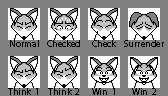
<style>
.page{position:relative;width:168px;height:96px;background:#808080}
.page>*{position:absolute;margin:0}
.t1{font:9.3px "MyriadPro-Regular";color:#000000}
</style>
<div class="page">
<p class="t1" style="left:10px;top:40px;width:29px;height:7px">Normal</p>
<p class="t1" style="left:47px;top:40px;width:33px;height:7px">Checked</p>
<p class="t1" style="left:92px;top:40px;width:24px;height:7px">Check</p>
<p class="t1" style="left:124px;top:40px;width:40px;height:7px">Surrender</p>
<p class="t1" style="left:8px;top:88px;width:30px;height:7px">Think  1</p>
<p class="t1" style="left:48px;top:88px;width:31px;height:7px">Think  2</p>
<p class="t1" style="left:92px;top:88px;width:23px;height:7px">Win  1</p>
<p class="t1" style="left:132px;top:88px;width:24px;height:7px">Win  2</p>
</div>
